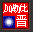
<style>
.page{position:relative;width:33px;height:32px;background:#f20000}
.page>*{position:absolute;margin:0}
.t1{font:10.4px "SimSun";letter-spacing:-0.25em;color:#ffffff}
.t2{font:11.7px "SimSun";color:#ffffff}
</style>
<div class="page">
<p class="t1" style="left:3px;top:4px;width:25px;height:9px">加勒比</p>
<p class="t2" style="left:16px;top:15px;width:11px;height:12px">晋</p>
</div>
